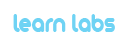
<style>
.page{position:relative;width:125px;height:50px;background:#ffffff}
.page>*{position:absolute;margin:0}
.t1{font:27.7px "zArista";color:#6fd3f4;scale:0.9 1}
</style>
<div class="page">
<p class="t1" style="left:13px;top:14px;width:102px;height:18px">learn labs</p>
</div>
